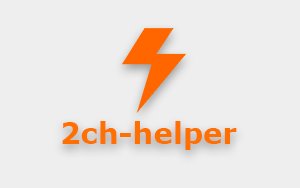
<style>
.page{position:relative;width:300px;height:188px;background:#eeeeee}
.page>*{position:absolute;margin:0}
.t1{font:29.2px "Verdana-Bold";color:#ff7000}
</style>
<div class="page">
<p class="t1" style="left:62px;top:121px;width:175px;height:29px">2ch-helper</p>
</div>
